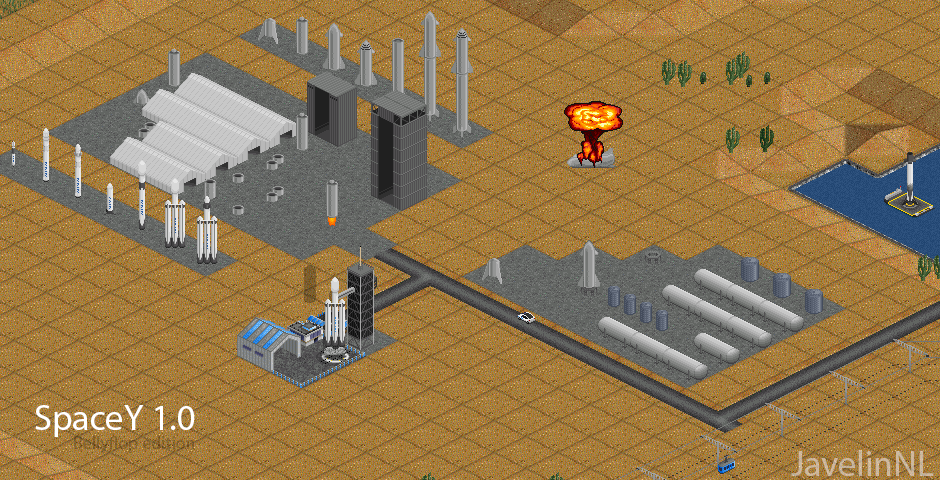
<style>
.page{position:relative;width:940px;height:480px;background:#9c8850}
.page>*{position:absolute;margin:0}
.t1{font:36px "MyriadPro-Regular";color:#ffffff}
.t2{font:18px "MyriadPro-Regular"}
.t3{font:36px "MyriadPro-Regular";color:#c7b59e}
</style>
<div class="page">
<p class="t1" style="left:35px;top:405px;width:160px;height:32px">SpaceY 1.0</p>
<p class="t2" style="left:74px;top:436px;width:120px;height:17px">Bellyflop edition</p>
<p class="t3" style="left:791px;top:450px;width:143px;height:26px">JavelinNL</p>
</div>
